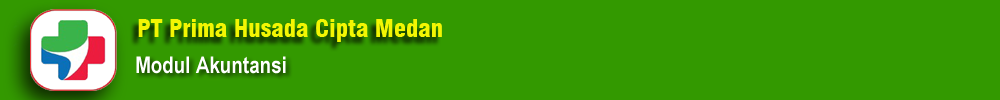
<style>
.page{position:relative;width:1000px;height:100px;background:#339900}
.page>*{position:absolute;margin:0}
.t1{font:24px "Swiss721BT-BlackCondensed";color:#f3f603}
</style>
<div class="page">
<p class="t1" style="left:138px;top:19px;width:304px;height:23px">PT Prima Husada Cipta Medan</p>
</div>
